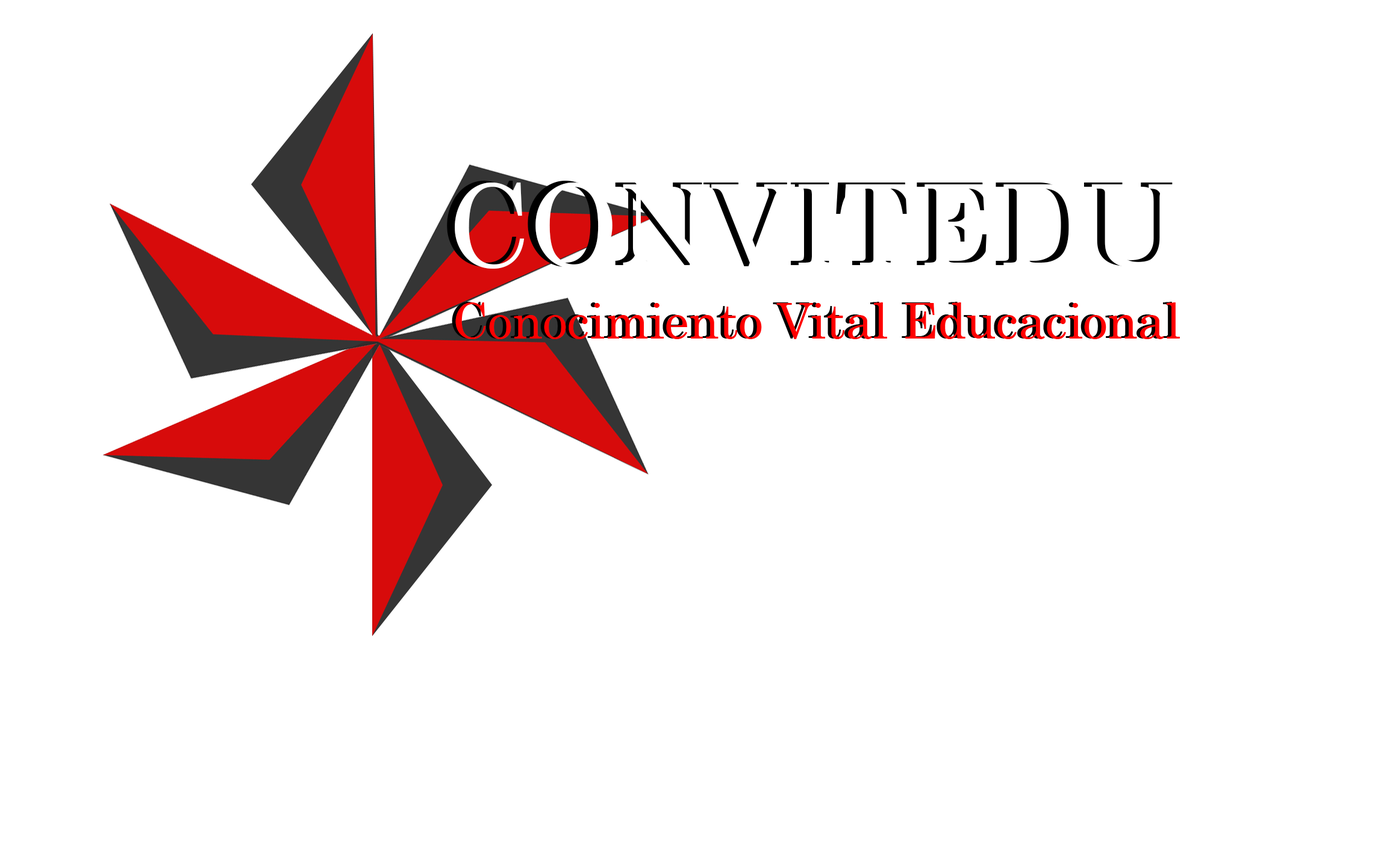
<style>
.page{position:relative;width:1378px;height:865px;background:#ffffff}
.page>*{position:absolute;margin:0}
.t1{font:114.5px "Century"}
.t2{font:114.5px "Century";color:#ffffff}
.t3{font:49.4px "Century";color:#010101}
.t4{font:49.4px "Century";color:#ff0101}
</style>
<div class="page">
<p class="t1" style="left:447px;top:181px;width:726px;height:86px">CONVITEDU</p>
<p class="t2" style="left:455px;top:183px;width:726px;height:86px">CONVITEDU</p>
<p class="t3" style="left:452px;top:302px;width:725px;height:37px">Conocimiento Vital Educacional</p>
<p class="t4" style="left:455px;top:302px;width:725px;height:37px">Conocimiento Vital Educacional</p>
</div>
